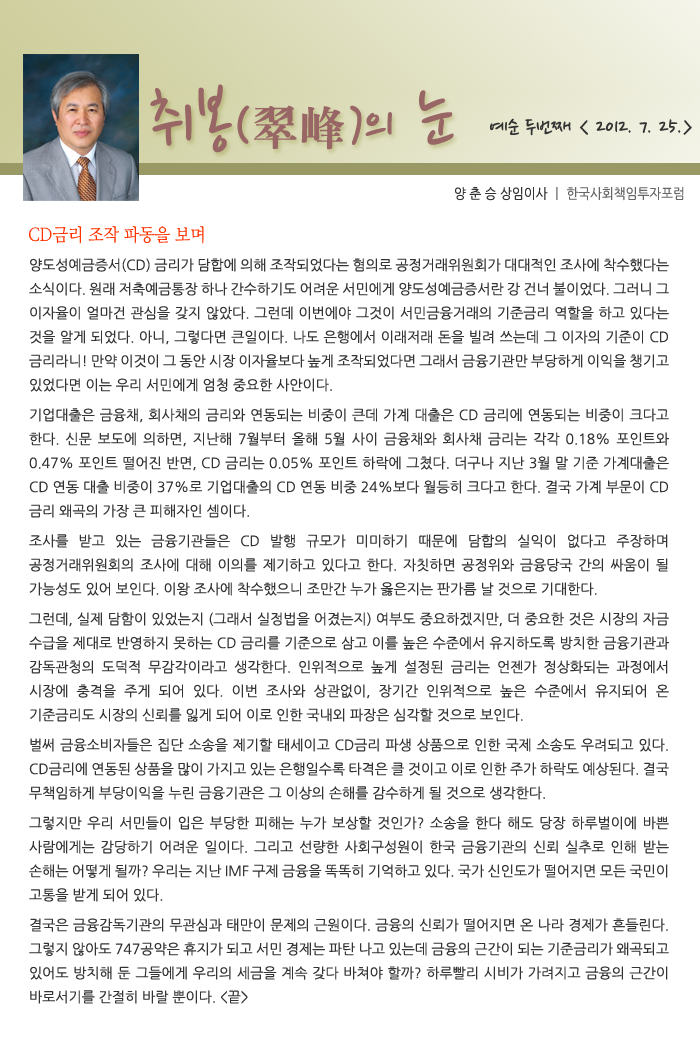
<style>
.page{position:relative;width:700px;height:1061px;background:#ffffff}
.page>*{position:absolute;margin:0}
.t1{font:77.5px "NanumPen";color:#996666}
.t2{font:60px "NanumPen";color:#996666}
.t3{font:48px "H2mjrE";color:#996666}
.t4{font:24px "NanumPen";color:#333333}
.t5{font:14px "NanumGothic";color:#666666;scale:0.9 1}
.t6{font:14px "NanumGothic";color:#333333;scale:0.9 1}
.t7{font:18px "NanumMyeongjo";color:#ff3300;scale:0.9 1}
.t8{font:14px/24px "NanumGothic";color:#333333}
.t9{font:14px/6px "NanumGothic";color:#333333}
</style>
<div class="page">
<p class="t1" style="left:150px;top:84px;width:304px;height:69px">취봉<span class="t2">(</span><span class="t3">翠峰</span><span class="t2">)</span><span class="t2">의</span> 눈</p>
<p class="t4" style="left:490px;top:118px;width:202px;height:18px">예순 두번째 &lt; 2012. 7. 25.&gt;</p>
<p class="t5" style="left:455px;top:187px;width:229px;height:14px"><span class="t6">양 춘 승 상임이사 </span>ㅣ 한국사회책임투자포럼</p>
<p class="t7" style="left:29px;top:226px;width:175px;height:18px">CD금리 조작 파동을 보며</p>
<p class="t8" style="left:29px;top:258px;width:640px;height:746px;text-align:justify">양도성예금증서(CD) 금리가 담합에 의해 조작되었다는 혐의로 공정거래위원회가 대대적인 조사에 착수했다는 소식이다. 원래 저축예금통장 하나 간수하기도 어려운 서민에게 양도성예금증서란 강 건너 불이었다. 그러니 그 이자율이 얼마건 관심을 갖지 않았다. 그런데 이번에야 그것이 서민금융거래의 기준금리 역할을 하고 있다는 것을 알게 되었다. 아니, 그렇다면 큰일이다. 나도 은행에서 이래저래 돈을 빌려 쓰는데 그 이자의 기준이 CD금리라니! 만약 이것이 그 동안 시장 이자율보다 높게 조작되었다면 그래서 금융기관만 부당하게 이익을 챙기고 있었다면 이는 우리 서민에게 엄<span class="t9">청 중요한 사안이다.<br><br>기업대출은 금융채, 회사채의 금리와 연동되</span>는 비중이 큰데 가계 대출은 CD 금리에 연동되는 비중이 크다고 한다. 신문 보도에 의하면, 지난해 7월부터 올해 5월 사이 금융채와 회사채 금리는 각각 0.18% 포인트와 0.47% 포인트 떨어진 반면, CD 금리는 0.05% 포인트 하락에 그쳤다. 더구나 지난 3월 말 기준 가계대출은  CD 연동 대출 비중이 37%로 기업대출의 CD 연동 비중 24%보다 월등히 크다고 한다. 결국 가계 부문이 CD 금리 왜곡의 가장 큰 피해자인 <span class="t9">셈이다. <br><br>조사를 받고 있는 금융기관들은 C</span>D 발행 규모가 미미하기 때문에 담합의 실익이 없다고 주장하며 공정거래위원회의 조사에 대해 이의를 제기하고 있다고 한다. 자칫하면 공정위와 금융당국 간의 싸움이 될 가능성도 있어 보인다. 이왕 조사에 착수했으<span class="t9">니 조만간 누가 옳은지는 판가름 날 것으로 기대한다.<br><br>그런데, 실제 담함이 있었는지 (그래서 실정법을 어겼는지) </span>여부도 중요하겠지만, 더 중요한 것은 시장의 자금 수급을 제대로 반영하지 못하는 CD 금리를 기준으로 삼고 이를 높은 수준에서 유지하도록 방치한 금융기관과 감독관청의 도덕적 무감각이라고 생각한다. 인위적으로 높게 설정된 금리는 언젠가 정상화되는 과정에서 시장에 충격을 주게 되어 있다. 이번 조사와 상관없이, 장기간 인위적으로 높은 수준에서 유지되어 온 기준금리도 시장의 신뢰를 잃게 되어 이로 <span class="t9">인한 국내외 파장은 심각할 것으로 보인다.<br><br>벌써 금융소비자들은 집단 소송을 제기할 태세이고 C</span>D금리 파생 상품으로 인한 국제 소송도 우려되고 있다. CD금리에 연동된 상품을 많이 가지고 있는 은행일수록 타격은 클 것이고 이로 인한 주가 하락도 예상된다. 결국 무책임하게 부당이익을 누린 금융기관은 그 이상의 <span class="t9">손해를 감수하게 될 것으로 생각한다.<br><br>그렇지만 우리 서민들이 입은 부당한 피해는 누가 보상할 </span>것인가? 소송을 한다 해도 당장 하루벌이에 바쁜 사람에게는 감당하기 어려운 일이다. 그리고 선량한 사회구성원이 한국 금융기관의 신뢰 실추로 인해 받는 손해는 어떻게 될까? 우리는 지난 IMF 구제 금융을 똑똑히 기억하고 있다. 국가 신인도가 떨어지면 모든 국민이 고통을 받게 <span class="t9">되어 있다.<br><br>결국은 금융감독기관</span>의 무관심과 태만이 문제의 근원이다. 금융의 신뢰가 떨어지면 온 나라 경제가 흔들린다. 그렇지 않아도 747공약은 휴지가 되고 서민 경제는 파탄 나고 있는데 금융의 근간이 되는 기준금리가 왜곡되고 있어도 방치해 둔 그들에게 우리의 세금을 계속 갖다 바쳐야 할까? 하루빨리 시비가 가려지고 금융의 근간이 바로서기를 간절히 바랄 뿐이다. &lt;끝&gt;</p>
</div>
